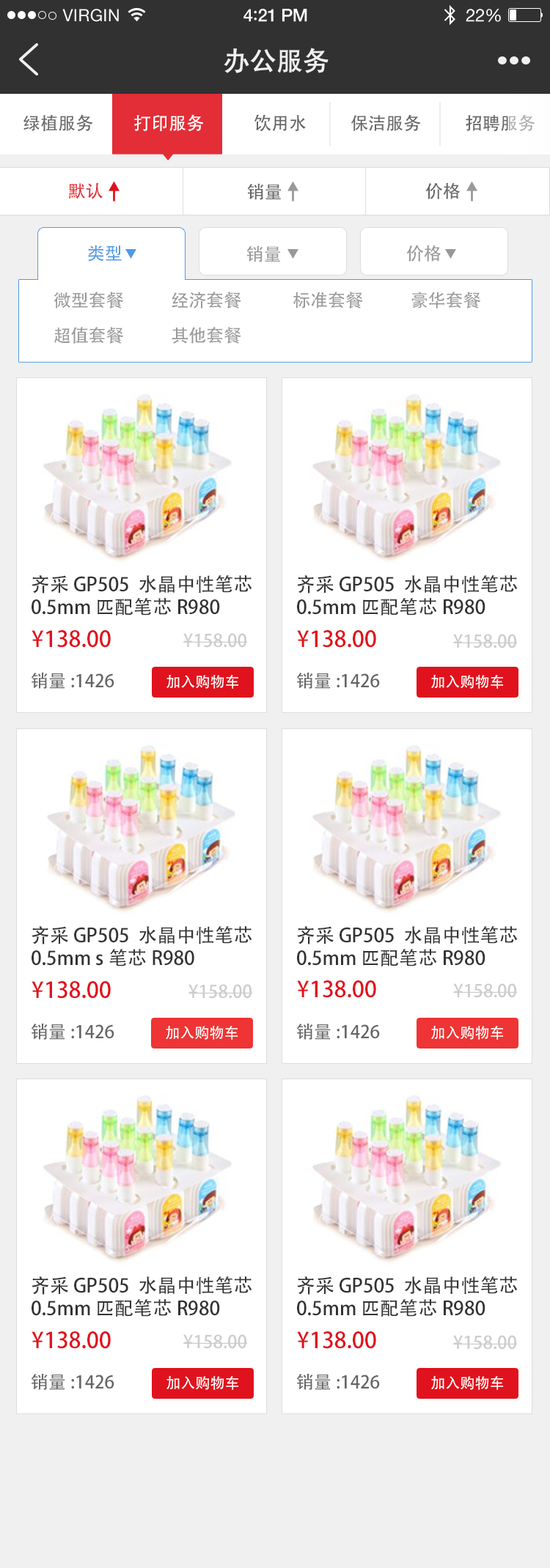
<style>
.page{position:relative;width:550px;height:1568px;background:#ffffff}
.page>*{position:absolute;margin:0}
.t1{font:26.4px "AdobeHeitiStd-Regular";color:#f0f0f0}
.t2{font:17.6px "AdobeHeitiStd-Regular";color:#666666}
.t3{font:17.6px "AdobeHeitiStd-Regular";color:#ffffff}
.t4{font:17.6px "AdobeHeitiStd-Regular";color:#e32d37}
.t5{font:17.6px "AdobeHeitiStd-Regular";color:#509ae6}
.t6{font:17.6px "AdobeHeitiStd-Regular";color:#999999}
.t7{font:17.6px/35.2px "AdobeHeitiStd-Regular";color:#999999}
.t8{font:19px/22.7px "AdobeHeitiStd-Regular";color:#333333}
.t9{font:22px "AdobeHeitiStd-Regular";color:#e0121d}
.t10{font:19.5px "AdobeHeitiStd-Regular";color:#e0121d;font-weight:bold}
.t11{font:17.6px "AdobeHeitiStd-Regular";color:#cccccc}
.t12{font:19.5px "AdobeHeitiStd-Regular";color:#cccccc;font-weight:bold}
.t13{font:14.7px "AdobeHeitiStd-Regular";color:#ffffff}
.t14{font:19.5px "AdobeHeitiStd-Regular";color:#cccccc}
</style>
<div class="page">
<p class="t1" style="left:223px;top:48px;width:105px;height:25px">办公服务</p>
<p class="t2" style="left:23px;top:114px;width:70px;height:17px">绿植服务</p>
<p class="t3" style="left:134px;top:114px;width:70px;height:17px">打印服务</p>
<p class="t2" style="left:254px;top:114px;width:52px;height:18px">饮用水</p>
<p class="t2" style="left:351px;top:114px;width:70px;height:17px">保洁服务</p>
<p class="t2" style="left:465px;top:114px;width:70px;height:17px">招聘服务</p>
<p class="t4" style="left:68px;top:182px;width:35px;height:17px">默认</p>
<p class="t2" style="left:247px;top:183px;width:34px;height:17px">销量</p>
<p class="t2" style="left:425px;top:182px;width:34px;height:17px">价格</p>
<p class="t5" style="left:88px;top:245px;width:34px;height:17px">类型</p>
<p class="t6" style="left:246px;top:245px;width:34px;height:17px">销量</p>
<p class="t6" style="left:406px;top:245px;width:34px;height:17px">价格</p>
<p class="t7" style="left:53px;top:292px;width:428px;height:52px">微型套餐            经济套餐             标准套餐            豪华套餐<br>超值套餐            其他套餐</p>
<p class="t8" style="left:32px;top:575px;width:220px;height:40px">齐采 GP505  水晶中性笔芯<br>0.5mm 匹配笔芯R980</p>
<p class="t8" style="left:297px;top:575px;width:220px;height:40px">齐采 GP505  水晶中性笔芯<br>0.5mm 匹配笔芯R980</p>
<p class="t9" style="left:32px;top:630px;width:79px;height:18px"><span class="t10"> </span>¥138.00</p>
<p class="t11" style="left:183px;top:633px;width:64px;height:15px"><span class="t12"> </span>¥158.00</p>
<p class="t9" style="left:297px;top:630px;width:79px;height:18px"><span class="t10"> </span>¥138.00</p>
<p class="t11" style="left:453px;top:634px;width:64px;height:14px"><span class="t12"> </span>¥158.00</p>
<p class="t2" style="left:31px;top:672px;width:83px;height:17px">销量:1426</p>
<p class="t13" style="left:166px;top:675px;width:72px;height:14px">加入购物车</p>
<p class="t2" style="left:296px;top:672px;width:84px;height:17px">销量:1426</p>
<p class="t13" style="left:431px;top:675px;width:72px;height:14px">加入购物车</p>
<p class="t8" style="left:32px;top:926px;width:220px;height:40px">齐采 GP505  水晶中性笔芯<br>0.5mm s笔芯R980</p>
<p class="t8" style="left:297px;top:926px;width:220px;height:40px">齐采 GP505  水晶中性笔芯<br>0.5mm 匹配笔芯R980</p>
<p class="t9" style="left:32px;top:981px;width:79px;height:18px"><span class="t10"> </span>¥138.00</p>
<p class="t11" style="left:188px;top:984px;width:64px;height:15px"><span class="t12"> </span>¥158.00</p>
<p class="t9" style="left:297px;top:980px;width:79px;height:18px">¥138.00</p>
<p class="t11" style="left:453px;top:983px;width:64px;height:15px"><span class="t14"> </span>¥158.00</p>
<p class="t2" style="left:31px;top:1023px;width:83px;height:17px">销量:1426</p>
<p class="t13" style="left:166px;top:1026px;width:71px;height:14px">加入购物车</p>
<p class="t2" style="left:296px;top:1023px;width:84px;height:17px">销量:1426</p>
<p class="t13" style="left:431px;top:1026px;width:72px;height:14px">加入购物车</p>
<p class="t8" style="left:32px;top:1276px;width:220px;height:41px">齐采 GP505  水晶中性笔芯<br>0.5mm 匹配笔芯R980</p>
<p class="t8" style="left:297px;top:1276px;width:220px;height:41px">齐采 GP505  水晶中性笔芯<br>0.5mm 匹配笔芯R980</p>
<p class="t9" style="left:32px;top:1331px;width:79px;height:18px"><span class="t10"> </span>¥138.00</p>
<p class="t11" style="left:183px;top:1334px;width:64px;height:15px"><span class="t12"> </span>¥158.00</p>
<p class="t9" style="left:297px;top:1331px;width:79px;height:18px"><span class="t10"> </span>¥138.00</p>
<p class="t11" style="left:453px;top:1335px;width:64px;height:15px"><span class="t12"> </span>¥158.00</p>
<p class="t2" style="left:31px;top:1373px;width:83px;height:17px">销量:1426</p>
<p class="t2" style="left:296px;top:1373px;width:84px;height:17px">销量:1426</p>
<p class="t13" style="left:166px;top:1376px;width:72px;height:14px">加入购物车</p>
<p class="t13" style="left:431px;top:1376px;width:72px;height:14px">加入购物车</p>
</div>
